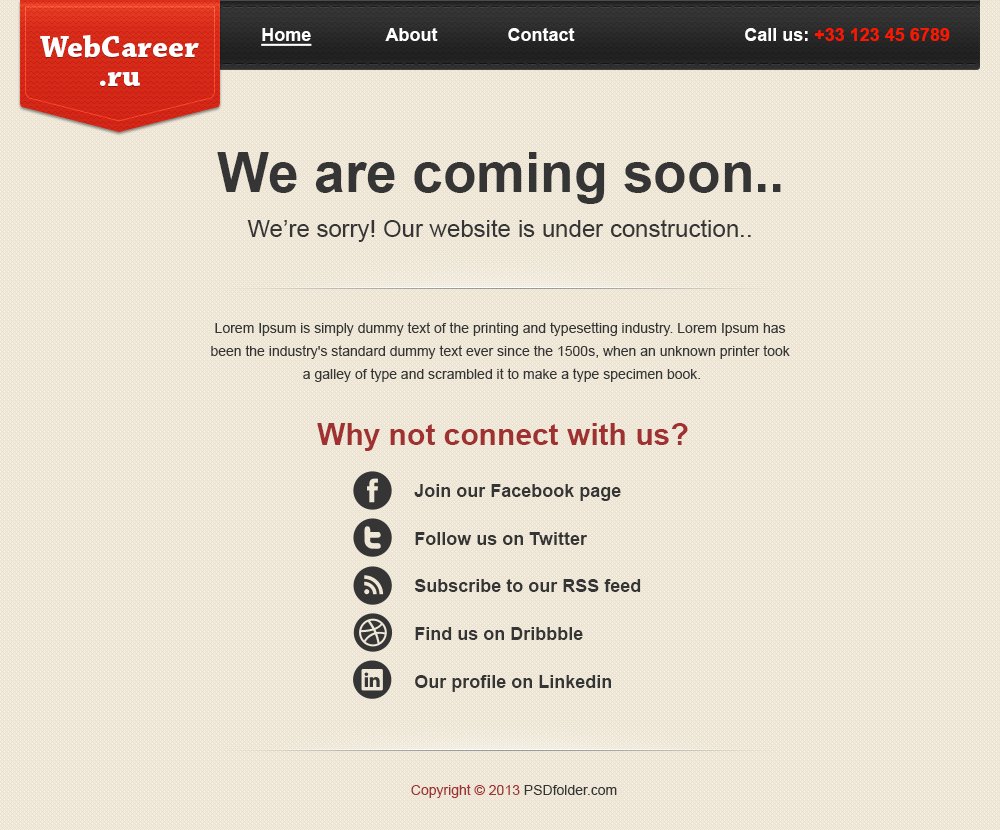
<style>
.page{position:relative;width:1000px;height:830px;background:#f3ecdc}
.page>*{position:absolute;margin:0}
.t1{font:18px "Arial-BoldMT";color:#ffffff}
.t2{font:18px "Arial-BoldMT";color:#ffffff;text-decoration:underline}
.t3{font:18px "Arial-BoldMT";color:#ff1600}
.t4{font:32px/14px "ChaparralPro-Bold";color:#ffffff}
.t5{font:55px "Arial-BoldMT";color:#353535}
.t6{font:24px "ArialMT";color:#353535}
.t7{font:14px/8px "ArialMT";color:#353535}
.t8{font:30px "Arial-BoldMT";color:#a03131}
.t9{font:18px "Arial-BoldMT";color:#353535}
.t10{font:14px "ArialMT";color:#a03131}
.t11{font:14px "ArialMT";color:#353535}
</style>
<div class="page">
<p class="t1" style="left:261px;top:28px;width:314px;height:18px"><span class="t2">Home</span>               About              Contact</p>
<p class="t3" style="left:745px;top:28px;width:205px;height:13px"><span class="t1">Call us: </span>+33 123 45 6789</p>
<p class="t4" style="left:40px;top:35px;width:159px;height:51px;text-align:center">WebCareer<br>.ru</p>
<p class="t5" style="left:217px;top:152px;width:564px;height:52px">We are coming soon..</p>
<p class="t6" style="left:247px;top:219px;width:504px;height:23px">We’re sorry! Our website is under construction..</p>
<p class="t7" style="left:211px;top:322px;width:579px;height:60px;text-align:center">Lorem Ipsum is simply dummy text of the printing and typesetting industry. Lorem Ipsum has <br>been the industry's standard dummy text ever since the 1500s, when an unknown printer took <br>a galley of type and scrambled it to make a type specimen book.</p>
<p class="t8" style="left:317px;top:423px;width:371px;height:28px">Why not connect with us?</p>
<p class="t9" style="left:414px;top:484px;width:207px;height:17px">Join our Facebook page</p>
<p class="t9" style="left:415px;top:532px;width:172px;height:13px">Follow us on Twitter</p>
<p class="t9" style="left:414px;top:579px;width:227px;height:13px">Subscribe to our RSS feed</p>
<p class="t9" style="left:415px;top:627px;width:168px;height:13px">Find us on Dribbble</p>
<p class="t9" style="left:415px;top:675px;width:196px;height:17px">Our profile on Linkedin</p>
<p class="t10" style="left:411px;top:784px;width:206px;height:14px">Copyright © 2013 <span class="t11">PSDfolder.com</span></p>
</div>
